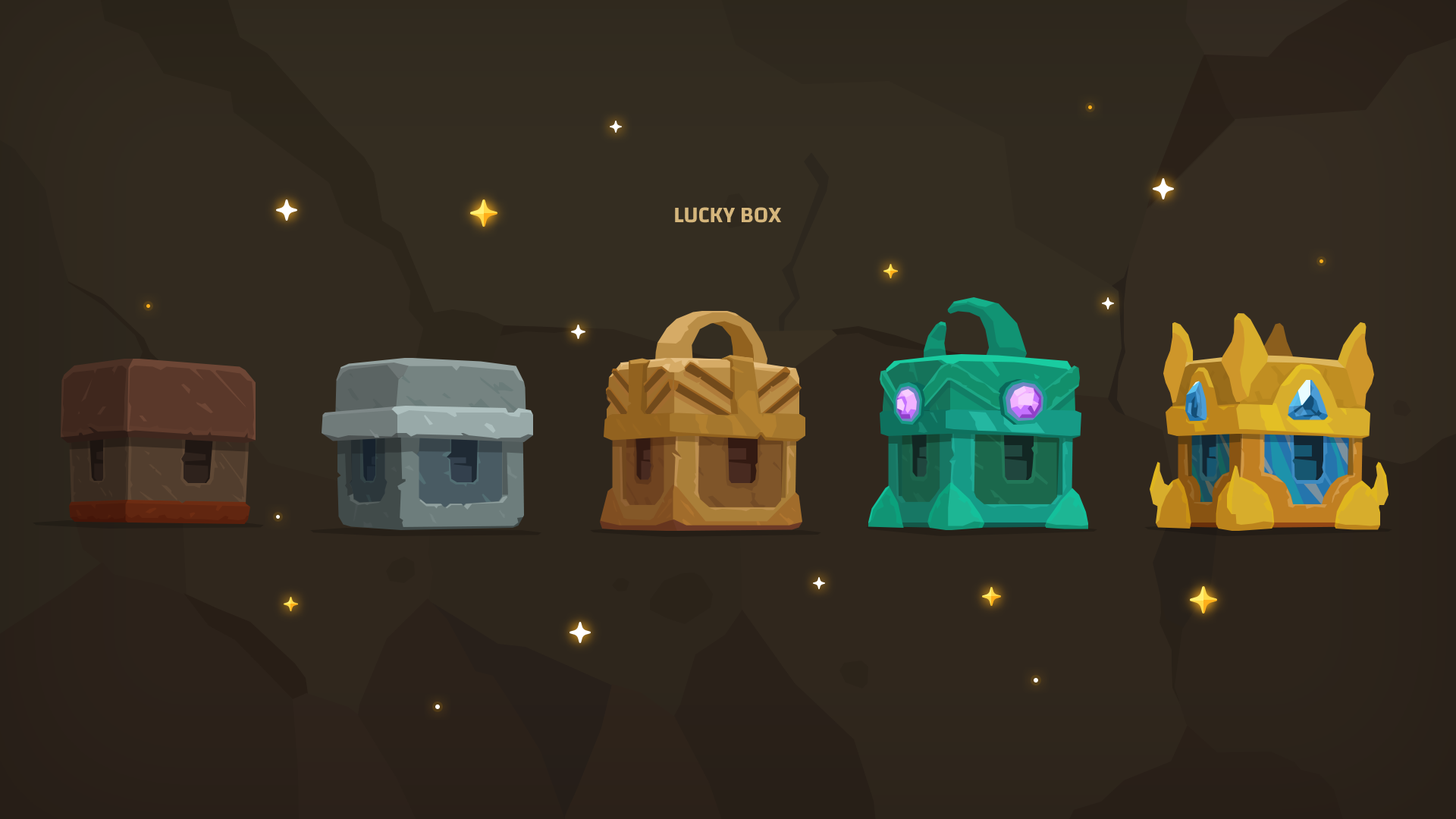
<style>
.page{position:relative;width:1456px;height:819px}
.page>*{position:absolute;margin:0}
.t1{font:22.7px "Changa-SemiBold";color:#d5b67c;text-transform:uppercase}
</style>
<div class="page">
<p class="t1" style="left:675px;top:207px;width:107px;height:16px">Lucky Box</p>
</div>
